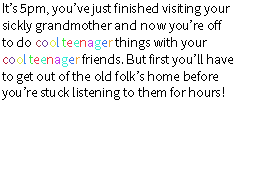
<style>
.page{position:relative;width:256px;height:192px;background:#ffffff}
.page>*{position:absolute;margin:0}
.t1{font:14px "SourceSansPro-Regular";color:#000000}
.t2{font:14px "SourceSansPro-Regular";color:#993949}
.t3{font:14px "SourceSansPro-Regular";color:#6c3999}
.t4{font:14px "SourceSansPro-Regular";color:#ddec37}
.t5{font:14px "SourceSansPro-Regular";color:#3783ed}
.t6{font:14px "SourceSansPro-Regular";color:#37ed3a}
.t7{font:14px "SourceSansPro-Regular";color:#ed3755}
.t8{font:14px "SourceSansPro-Regular";color:#37edbc}
.t9{font:14px "SourceSansPro-Regular";color:#ed3737}
.t10{font:14px "SourceSansPro-Regular";color:#c037ed}
.t11{font:14px "SourceSansPro-Regular";color:#37edd5}
.t12{font:14px "SourceSansPro-Regular";color:#3770ed}
.t13{font:14px "SourceSansPro-Regular";color:#eda737}
.t14{font:14px "SourceSansPro-Regular";color:#b71631}
</style>
<div class="page">
<p class="t1" style="left:2px;top:3px;width:231px;height:97px">It’s 5pm, you’ve just finished visiting your<br>sickly grandmother and now you’re off<br>to do <span class="t2">c</span><span class="t3">o</span><span class="t4">o</span><span class="t5">l </span><span class="t6">t</span><span class="t7">e</span><span class="t8">e</span><span class="t9">n</span><span class="t10">a</span><span class="t11">g</span><span class="t12">e</span><span class="t13">r </span>things with your<br><span class="t14">c</span><span class="t3">o</span><span class="t4">o</span><span class="t5">l </span><span class="t6">t</span><span class="t7">e</span><span class="t8">e</span><span class="t9">n</span><span class="t10">a</span><span class="t11">g</span><span class="t12">e</span><span class="t13">r</span> friends. But first you’ll have<br>to get out of the old folk’s home before<br>you’re stuck listening to them for hours!</p>
</div>
